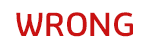
<style>
.page{position:relative;width:150px;height:50px;background:#ffffff}
.page>*{position:absolute;margin:0}
.t1{font:33.3px "GyeonggiTitleMOTF";color:#c91212}
</style>
<div class="page">
<p class="t1" style="left:16px;top:12px;width:117px;height:25px">WRONG</p>
</div>
